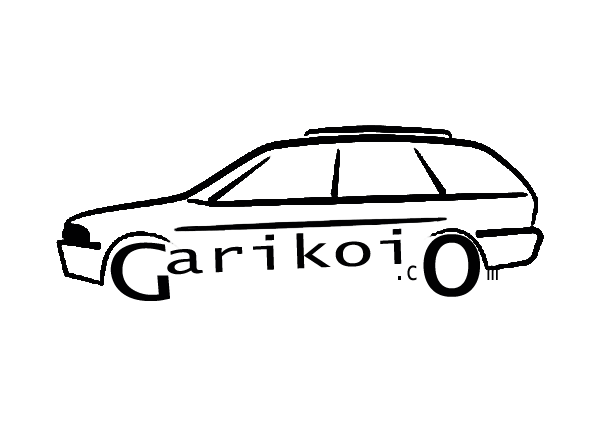
<style>
.page{position:relative;width:600px;height:422px;background:#ffffff}
.page>*{position:absolute;margin:0}
.t1{font:45.3px "LucidaSans-Typewriter";letter-spacing:0.005em;color:#010102;scale:1.54 1}
.t2{font:81.9px "LucidaSans-TypewriterOblique";letter-spacing:0.005em;color:#010102;scale:1.35 1}
.t3{font:46.5px "LucidaSans-Typewriter";letter-spacing:0.005em;color:#010102;scale:0.74 1}
.t4{font:112.9px "LucidaSans-Typewriter";letter-spacing:0.005em;color:#010102}
</style>
<div class="page">
<p class="t1" style="left:167px;top:228px;width:235px;height:47px;rotate:-3deg">arikoi</p>
<p class="t2" style="left:110px;top:242px;width:60px;height:59px">G</p>
<p class="t3" style="left:398px;top:234px;width:100px;height:63px">.c<span class="t4">o</span>m</p>
</div>
